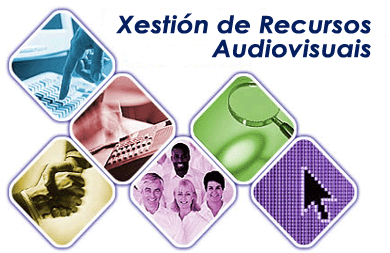
<style>
.page{position:relative;width:390px;height:253px;background:#ffffff}
.page>*{position:absolute;margin:0}
.t1{font:24px/24px "CenturyGothic-BoldItalic";color:#051f5e;scale:1.1 1}
</style>
<div class="page">
<p class="t1" style="left:116px;top:13px;width:255px;height:45px">Xestión de Recursos<br>             Audiovisuais</p>
</div>
